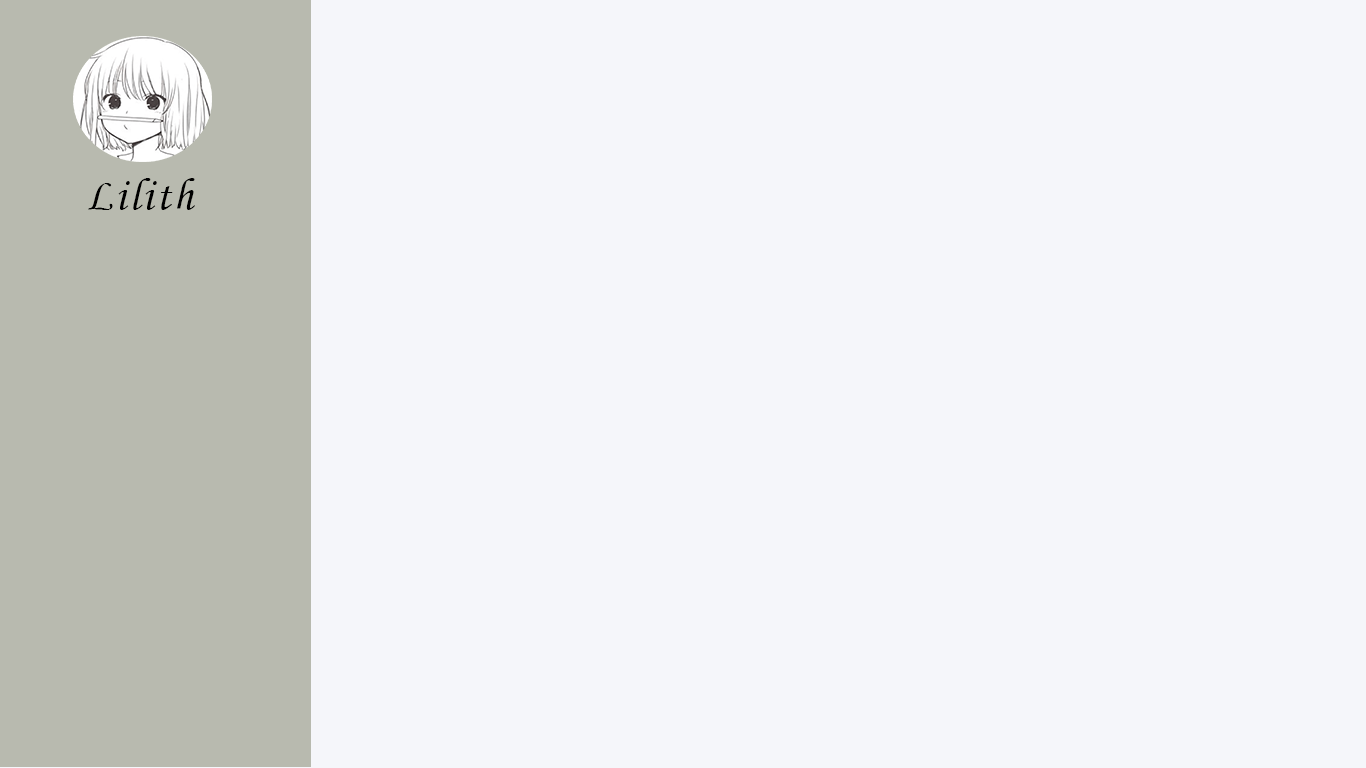
<style>
.page{position:relative;width:1366px;height:768px;background:#f5f6fa}
.page>*{position:absolute;margin:0}
.t1{font:45px "STLiti";letter-spacing:0.06em;color:#000000}
</style>
<div class="page">
<p class="t1" style="left:88px;top:178px;width:107px;height:32px">Lilith</p>
</div>
